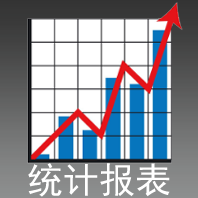
<style>
.page{position:relative;width:198px;height:198px;background:#ffffff}
.page>*{position:absolute;margin:0}
.t1{font:36px "SimHei";color:#ffffff}
</style>
<div class="page">
<p class="t1" style="left:28px;top:163px;width:142px;height:34px">统计报表</p>
</div>
